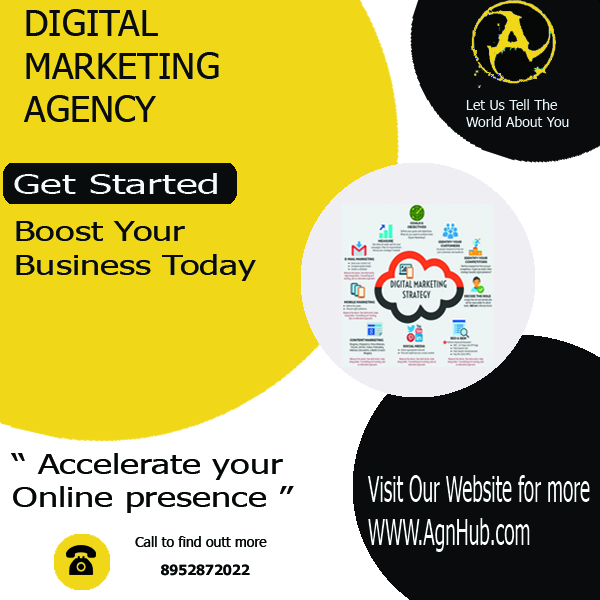
<style>
.page{position:relative;width:600px;height:600px;background:#f0d717}
.page>*{position:absolute;margin:0}
.t1{font:36px "Tahoma";color:#090c0c}
.t2{font:14px "Tahoma";color:#ebf2fa}
.t3{font:26.5px "Tahoma";color:#f6f9fb;scale:1.55 1}
.t4{font:28.2px "Tahoma";color:#090c0c;scale:1.28 1}
.t5{font:27.8px "Tahoma";color:#060808;scale:1.3 1}
.t6{font:35.9px "Tahoma";color:#fbfdfd;scale:0.53 1}
.t7{font:14px "Tahoma";color:#040505}
.t8{font:14px "Tahoma-Bold";color:#050707}
</style>
<div class="page">
<p class="t1" style="left:24px;top:9px;width:195px;height:113px">DIGITAL<br>MARKETING<br>AGENCY</p>
<p class="t2" style="left:466px;top:99px;width:103px;height:28px">Let Us Tell The<br>World About You</p>
<p class="t3" style="left:14px;top:173px;width:203px;height:21px">Get Started</p>
<p class="t4" style="left:16px;top:221px;width:240px;height:60px">Boost Your<br>Business Today</p>
<p class="t5" style="left:11px;top:453px;width:283px;height:60px">“ Accelerate your<br>Online presence ”</p>
<p class="t6" style="left:368px;top:475px;width:222px;height:77px">Visit Our Website for more<br>WWW.AgnHub.com</p>
<p class="t7" style="left:135px;top:536px;width:132px;height:11px">Call to find outt more</p>
<p class="t8" style="left:161px;top:564px;width:89px;height:12px">8952872022</p>
</div>
